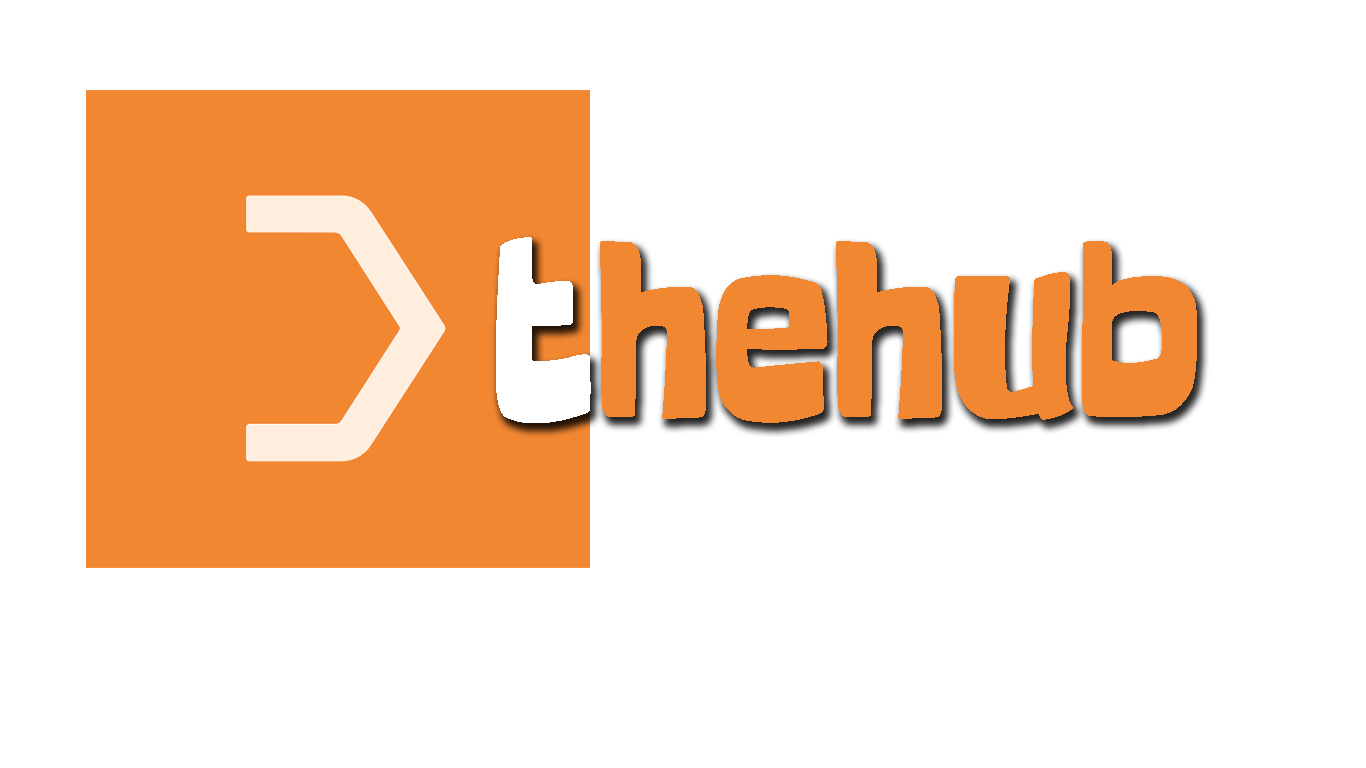
<style>
.page{position:relative;width:1366px;height:768px;background:#ffffff}
.page>*{position:absolute;margin:0}
.t1{font:200px "Playtimes";color:#f28731;scale:0.64 1}
.t2{font:200px "Playtimes";color:#ffffff;scale:0.64 1}
</style>
<div class="page">
<p class="t1" style="left:496px;top:237px;width:701px;height:186px"><span class="t2">t</span>heHub</p>
</div>
